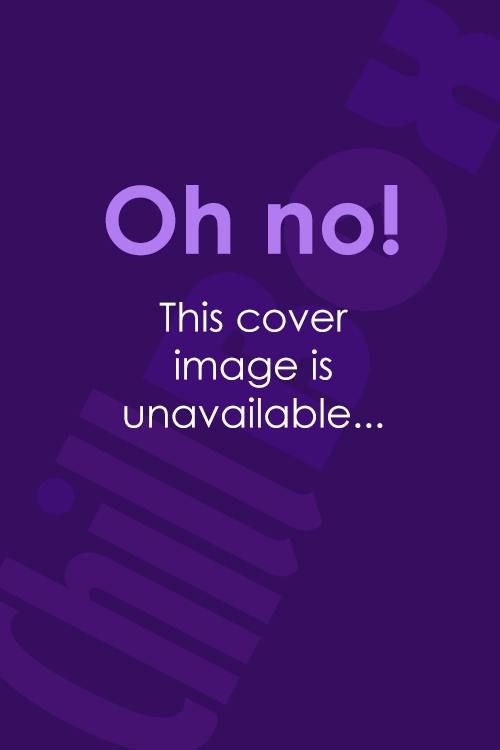
<style>
.page{position:relative;width:500px;height:750px;background:#350e60}
.page>*{position:absolute;margin:0}
.t1{font:93.3px "CenturyGothic-Bold";color:#b27bf0}
.t2{font:40px "CenturyGothic";color:#ffffff}
</style>
<div class="page">
<p class="t1" style="left:105px;top:185px;width:294px;height:71px">Oh no!</p>
<p class="t2" style="left:124px;top:301px;width:259px;height:127px;text-align:center">This cover image is unavailable...</p>
</div>
